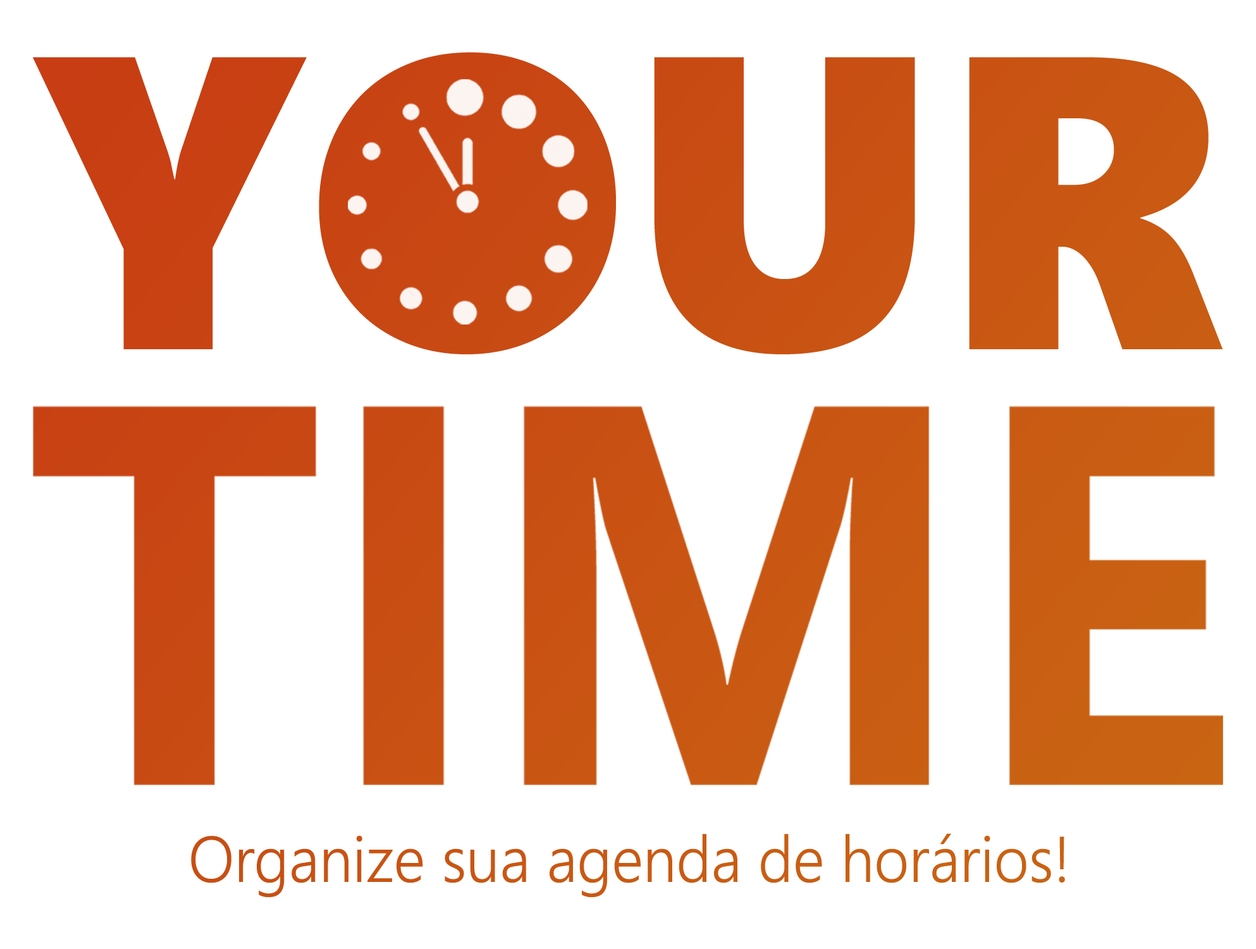
<style>
.page{position:relative;width:1256px;height:949px;background:#ffffff}
.page>*{position:absolute;margin:0}
.t1{font:416.7px "SegoeUIBlack";color:#c84d13}
.t2{font:64.5px "SegoeUI-Semilight";color:#c95913;scale:0.94 1}
</style>
<div class="page">
<p class="t1" style="left:33px;top:52px;width:1191px;height:302px">YOUR</p>
<p class="t2" style="left:191px;top:833px;width:874px;height:64px">Organize sua agenda de horários!</p>
</div>
